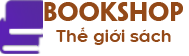
<style>
.page{position:relative;width:189px;height:56px;background:#ffffff}
.page>*{position:absolute;margin:0}
.t1{font:23.8px "#9Slide03Penumbra-Bold";color:#934918}
.t2{font:16.5px "#9Slide03Kaleko105Round-Bold";color:#934918}
</style>
<div class="page">
<p class="t1" style="left:44px;top:2px;width:139px;height:19px">BOOKsHOP</p>
<p class="t2" style="left:56px;top:27px;width:115px;height:18px">Thế giới sách</p>
</div>
